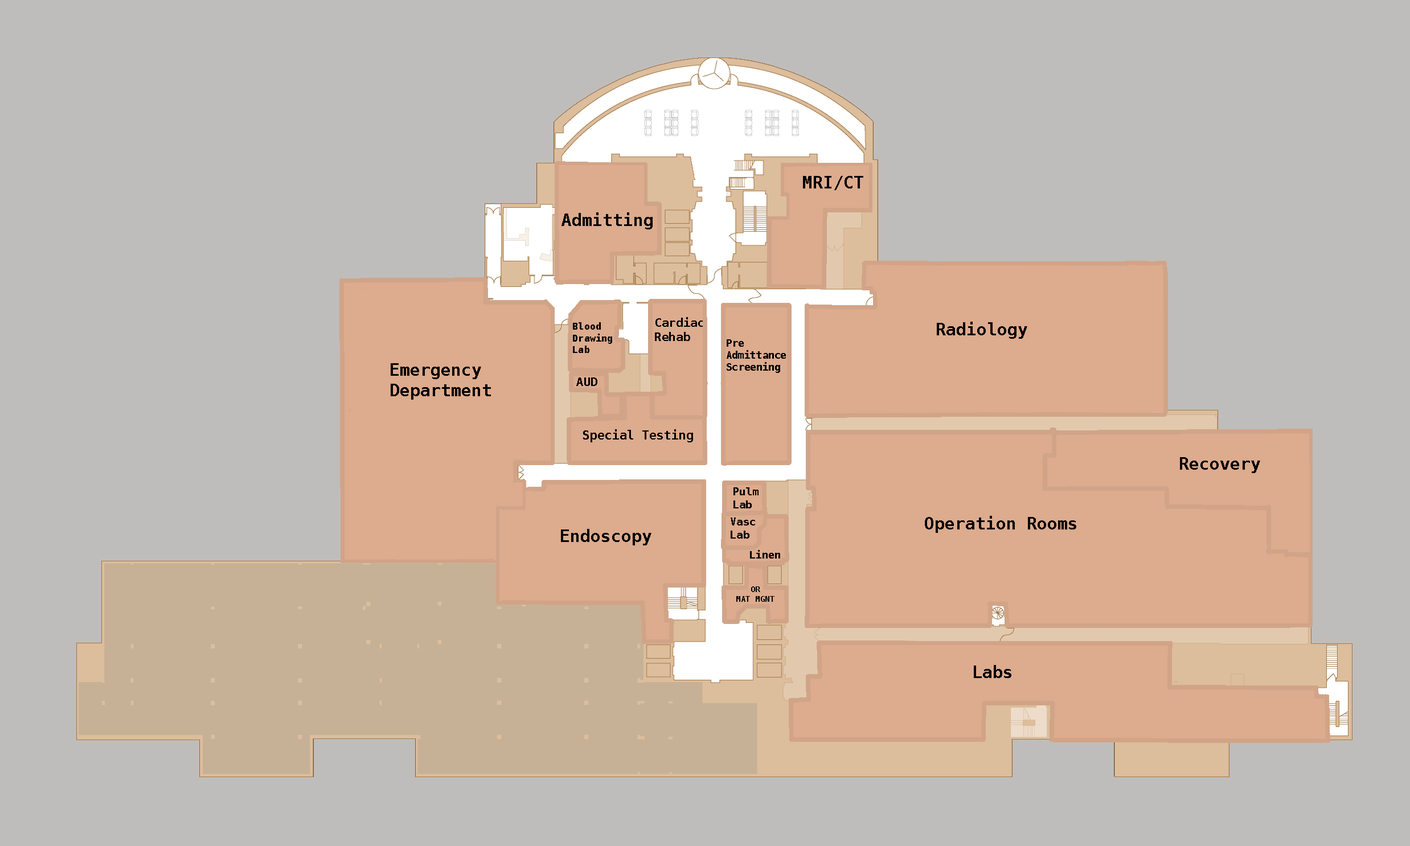
<style>
.page{position:relative;width:1410px;height:846px;background:#bfbdbb}
.page>*{position:absolute;margin:0}
.t1{font:17.1px "Menlo-Bold";color:#000000}
.t2{font:12px "Menlo-Bold";color:#000000}
.t3{font:9.7px "Menlo-Bold";color:#000000}
.t4{font:10.1px "Menlo-Bold";color:#000000}
.t5{font:11.8px "Menlo-Bold";color:#000000}
.t6{font:12.3px "Menlo-Bold";color:#000000}
.t7{font:10.7px "Menlo-Bold";color:#000000}
.t8{font:10.8px "Menlo-Bold";color:#000000}
.t9{font:10.4px "Menlo-Bold";color:#000000}
.t10{font:8.1px "Menlo-Bold";color:#000000}
</style>
<div class="page">
<p class="t1" style="left:803px;top:176px;width:60px;height:14px">MRI/CT</p>
<p class="t1" style="left:561px;top:212px;width:91px;height:17px">Admitting</p>
<p class="t2" style="left:655px;top:317px;width:49px;height:24px">Cardiac<br>Rehab</p>
<p class="t3" style="left:573px;top:322px;width:39px;height:31px">Blood<br>Drawing<br>Lab</p>
<p class="t1" style="left:936px;top:322px;width:91px;height:17px">Radiology</p>
<p class="t4" style="left:726px;top:339px;width:60px;height:34px">Pre<br>Admittance <br>Screening</p>
<p class="t1" style="left:391px;top:363px;width:100px;height:37px">Emergency<br>Department</p>
<p class="t5" style="left:576px;top:377px;width:21px;height:9px">AUD</p>
<p class="t6" style="left:583px;top:429px;width:110px;height:13px">Special Testing</p>
<p class="t1" style="left:1180px;top:457px;width:80px;height:16px">Recovery</p>
<p class="t7" style="left:733px;top:487px;width:25px;height:21px">Pulm<br>Lab</p>
<p class="t8" style="left:730px;top:517px;width:25px;height:22px">Vasc<br>Lab</p>
<p class="t1" style="left:925px;top:516px;width:151px;height:17px">Operation Rooms</p>
<p class="t1" style="left:561px;top:529px;width:90px;height:16px">Endoscopy</p>
<p class="t9" style="left:750px;top:550px;width:30px;height:8px">Linen</p>
<p class="t10" style="left:736px;top:586px;width:38px;height:16px;text-align:center">OR<br>MAT MGNT</p>
<p class="t1" style="left:973px;top:665px;width:38px;height:13px">Labs</p>
</div>
